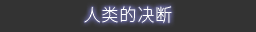
<style>
.page{position:relative;width:256px;height:32px;background:#333333}
.page>*{position:absolute;margin:0}
.t1{font:17px "NotoSansSC-Thin";letter-spacing:0.06em;color:#ffffff}
</style>
<div class="page">
<p class="t1" style="left:84px;top:6px;width:88px;height:17px">人类的决断</p>
</div>
